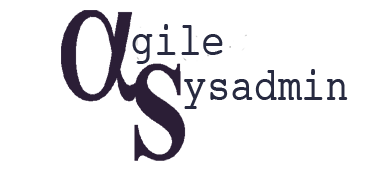
<style>
.page{position:relative;width:365px;height:175px;background:#ffffff}
.page>*{position:absolute;margin:0}
.t1{font:46.4px "Courier";color:#272a40;scale:0.85 1}
</style>
<div class="page">
<p class="t1" style="left:132px;top:24px;width:91px;height:40px">gile</p>
<p class="t1" style="left:184px;top:69px;width:164px;height:40px">ysadmin</p>
</div>
